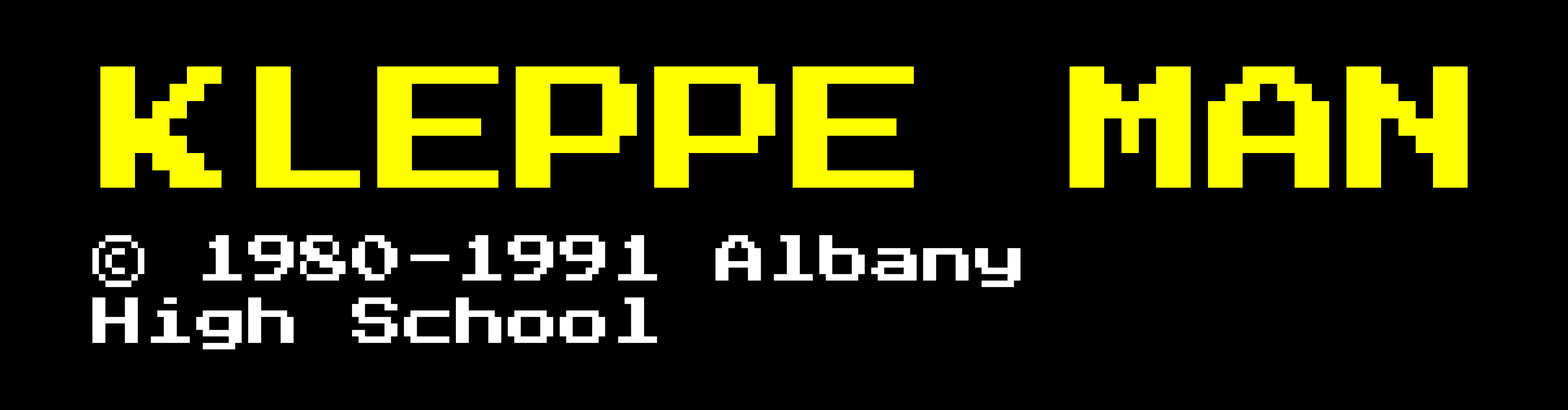
<style>
.page{position:relative;width:1568px;height:410px;background:#000000}
.page>*{position:absolute;margin:0}
.t1{font:138.5px "PressStart2P-Regular";color:#ffff00}
.t2{font:51.9px "PressStart2P-Regular";color:#ffffff}
</style>
<div class="page">
<p class="t1" style="left:100px;top:66px;width:1368px;height:122px">KLEPPE MAN</p>
<p class="t2" style="left:92px;top:235px;width:929px;height:114px">© 1980-1991 Albany High School</p>
</div>
